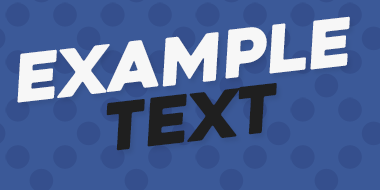
<style>
.page{position:relative;width:380px;height:190px;background:#3b5998}
.page>*{position:absolute;margin:0}
.t1{font:65.6px "Heavitas";color:#f7f7f7;font-style:italic}
.t2{font:65.6px "Heavitas";color:#1f1f1f;font-style:italic}
</style>
<div class="page">
<p class="t1" style="left:17px;top:16px;width:333px;height:87px;rotate:-7deg">example</p>
<p class="t2" style="left:106px;top:83px;width:171px;height:68px;rotate:-7deg">text</p>
</div>
